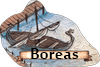
<style>
.page{position:relative;width:100px;height:67px;background:#ffffff}
.page>*{position:absolute;margin:0}
.t1{font:22px "SakkalMajallaBold";color:#000000}
</style>
<div class="page">
<p class="t1" style="left:31px;top:48px;width:48px;height:11px">Boreas</p>
</div>
